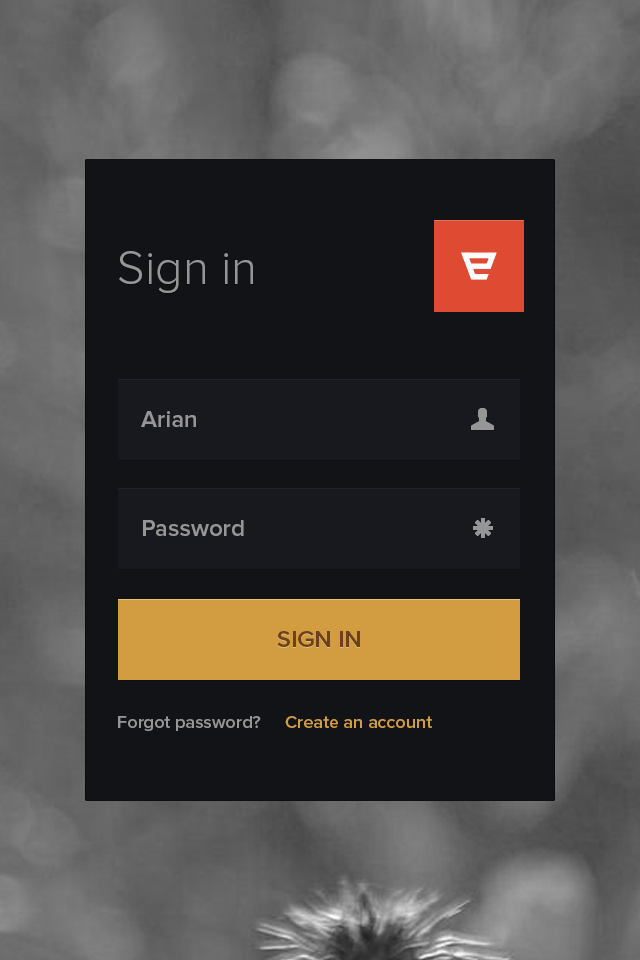
<style>
.page{position:relative;width:640px;height:960px;background:#121317}
.page>*{position:absolute;margin:0}
.t1{font:48px "ProximaNova-Light";color:#979696}
.t2{font:24px "ProximaNova-Semibold";color:#979696}
.t3{font:24px "ProximaNova-Semibold";color:#6c411b}
.t4{font:18px "ProximaNova-Semibold";color:#979696}
.t5{font:18px "ProximaNova-Semibold";color:#d29d41}
</style>
<div class="page">
<p class="t1" style="left:119px;top:251px;width:134px;height:42px">Sign in</p>
<p class="t2" style="left:141px;top:411px;width:55px;height:16px">Arian</p>
<p class="t2" style="left:143px;top:520px;width:101px;height:16px">Password</p>
<p class="t3" style="left:277px;top:631px;width:83px;height:16px">SIGN IN</p>
<p class="t4" style="left:118px;top:716px;width:143px;height:15px">Forgot password?</p>
<p class="t5" style="left:285px;top:716px;width:147px;height:12px">Create an account</p>
</div>
